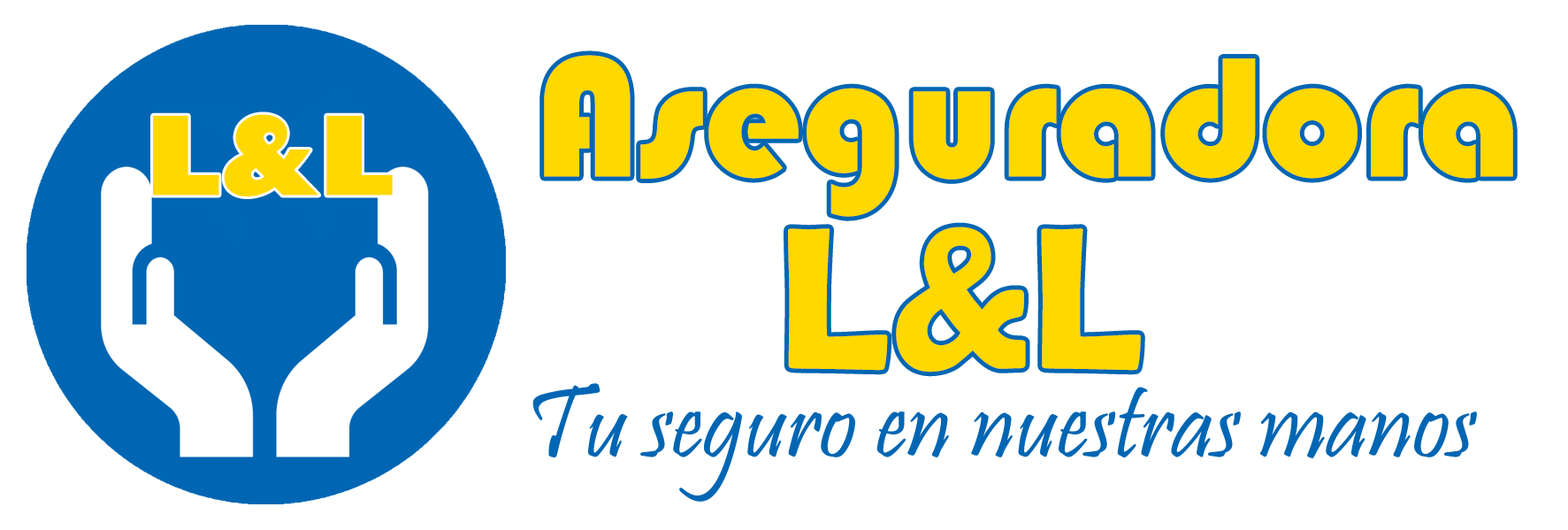
<style>
.page{position:relative;width:1568px;height:530px;background:#ffffff}
.page>*{position:absolute;margin:0}
.t1{font:176.9px "Bauhaus93";color:#ffd800}
.t2{font:106.1px "GillSans-UltraBold";color:#ffd800}
.t3{font:203.4px "BerlinSansFBDemi-Bold";color:#ffd800}
.t4{font:106.1px "Pristina-Regular";color:#0066b3}
</style>
<div class="page">
<p class="t1" style="left:544px;top:55px;width:969px;height:162px">Aseguradora</p>
<p class="t2" style="left:153px;top:114px;width:240px;height:82px">L&amp;L</p>
<p class="t3" style="left:788px;top:226px;width:353px;height:146px">L&amp;L</p>
<p class="t4" style="left:532px;top:383px;width:945px;height:118px">Tu seguro en nuestras manos</p>
</div>
